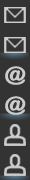
<style>
.page{position:relative;width:30px;height:180px;background:#333333}
.page>*{position:absolute;margin:0}
.t1{font:18.8px "GoudyStout";color:#cccccc;scale:1.06 1}
</style>
<div class="page">
<p class="t1" style="left:5px;top:66px;width:21px;height:19px">@</p>
<p class="t1" style="left:5px;top:96px;width:21px;height:19px">@</p>
</div>
